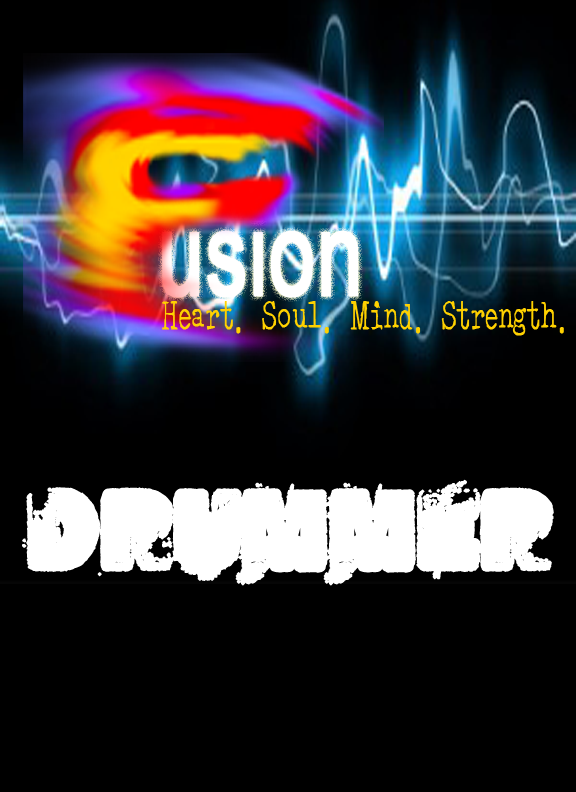
<style>
.page{position:relative;width:576px;height:792px;background:#000000}
.page>*{position:absolute;margin:0}
.t1{font:120px "ArialMT";color:#ffffff;font-weight:bold;scale:0.68 1}
.t2{font:30px "AcousticLight";color:#ffd100;font-weight:bold;scale:0.66 1}
.t3{font:120px "HARDROCK";color:#ffffff;text-transform:uppercase;font-weight:bold}
</style>
<div class="page">
<p class="t1" style="left:162px;top:209px;width:197px;height:89px">usion</p>
<p class="t2" style="left:162px;top:301px;width:402px;height:35px">Heart. Soul. Mind. Strength.</p>
<p class="t3" style="left:22px;top:479px;width:532px;height:107px">DRUMMER</p>
</div>
